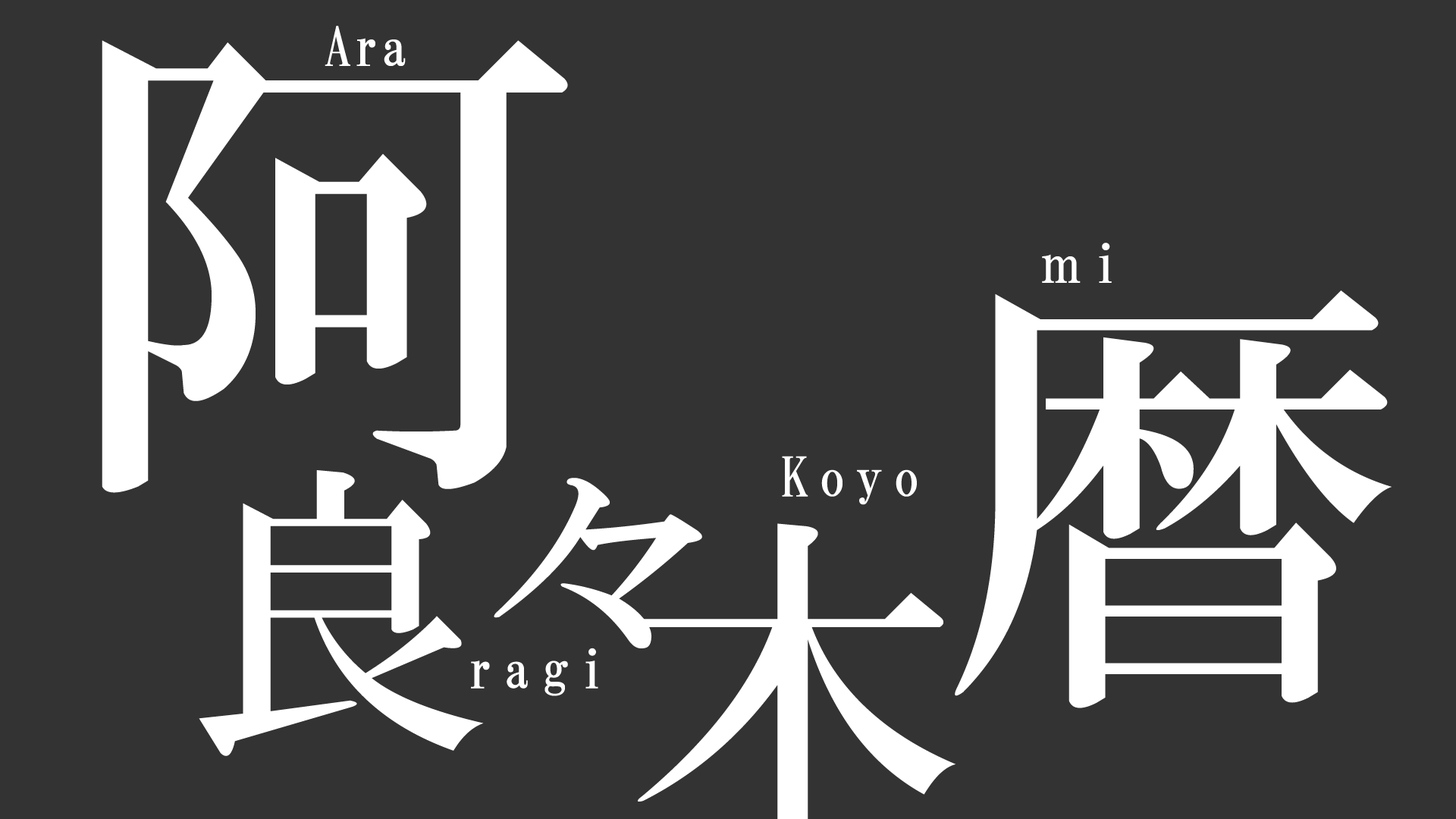
<style>
.page{position:relative;width:1456px;height:819px;background:#333333}
.page>*{position:absolute;margin:0}
.t1{font:54.6px "HGMinchoB";letter-spacing:0.025em;color:#ffffff}
.t2{font:509.5px "HGMinchoB";letter-spacing:0.18em;color:#ffffff}
.t3{font:54.6px "HGMinchoB";letter-spacing:0.18em;color:#ffffff;scale:0.82 1}
.t4{font:54.6px "HGMinchoB";letter-spacing:0.18em;color:#ffffff}
.t5{font:460.8px "HGMinchoB";letter-spacing:0.18em;color:#ffffff}
.t6{font:304.1px "HGMinchoB";letter-spacing:0.18em;color:#ffffff}
.t7{font:259.5px "HGMinchoB";letter-spacing:0.18em;color:#ffffff}
</style>
<div class="page">
<p class="t1" style="left:325px;top:26px;width:81px;height:40px">Ara</p>
<p class="t2" style="left:102px;top:40px;width:466px;height:453px">阿</p>
<p class="t3" style="left:1042px;top:243px;width:70px;height:40px">ｍ<span class="t4">i</span></p>
<p class="t5" style="left:955px;top:290px;width:437px;height:418px">暦</p>
<p class="t4" style="left:782px;top:456px;width:135px;height:49px">Koyo</p>
<p class="t6" style="left:199px;top:470px;width:285px;height:286px">良</p>
<p class="t7" style="left:494px;top:478px;width:208px;height:170px">々</p>
<p class="t4" style="left:471px;top:648px;width:127px;height:48px">ragi</p>
</div>
